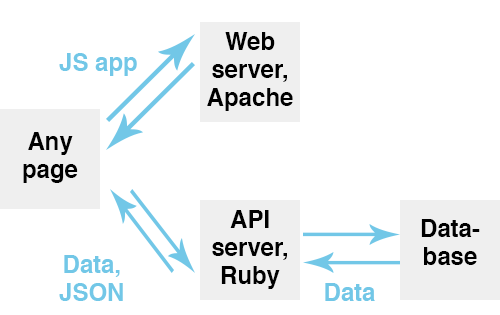
<style>
.page{position:relative;width:500px;height:315px;background:#ffffff}
.page>*{position:absolute;margin:0}
.t1{font:24px/28.1px "Helvetica-Bold";color:#000000}
.t2{font:24px "Helvetica-Bold";color:#72c7e7}
.t3{font:24px/28.1px "Helvetica-Bold";color:#72c7e7}
</style>
<div class="page">
<p class="t1" style="left:207px;top:32px;width:86px;height:79px;text-align:center">Web server, Apache</p>
<p class="t2" style="left:59px;top:53px;width:78px;height:23px">JS app</p>
<p class="t1" style="left:23px;top:132px;width:55px;height:51px;text-align:center">Any page</p>
<p class="t1" style="left:212px;top:210px;width:75px;height:79px;text-align:center">API server, Ruby</p>
<p class="t1" style="left:421px;top:219px;width:59px;height:46px;text-align:center">Data-<br>base</p>
<p class="t3" style="left:59px;top:255px;width:64px;height:46px;text-align:center">Data,<br>JSON</p>
<p class="t2" style="left:325px;top:283px;width:50px;height:18px">Data</p>
</div>
